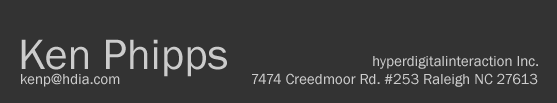
<style>
.page{position:relative;width:557px;height:103px;background:#333333}
.page>*{position:absolute;margin:0}
.t1{font:44px "FranklinGothic-Book";color:#cccccc}
.t2{font:15px "FranklinGothic-Book";color:#cccccc}
</style>
<div class="page">
<p class="t1" style="left:21px;top:39px;width:206px;height:38px">Ken Phipps</p>
<p class="t2" style="left:373px;top:56px;width:165px;height:13px">hyperdigitalinteraction Inc.</p>
<p class="t2" style="left:21px;top:73px;width:99px;height:14px">kenp@hdia.com</p>
<p class="t2" style="left:252px;top:73px;width:286px;height:14px">7474 Creedmoor Rd. #253 Raleigh NC 27613</p>
</div>
